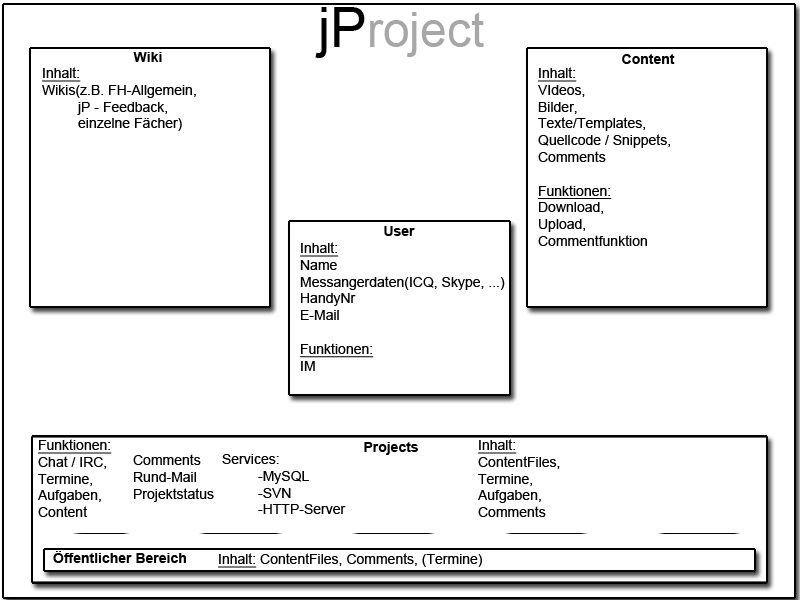
<style>
.page{position:relative;width:800px;height:600px;background:#ffffff}
.page>*{position:absolute;margin:0}
.t1{font:48px "ArialMT";color:#a7a7a7}
.t2{font:55px "ArialMT";color:#010101}
.t3{font:14px "Arial-BoldMT";color:#000000}
.t4{font:14px "ArialMT";color:#000000}
.t5{font:14px "ArialMT";color:#000000;text-decoration:underline}
</style>
<div class="page">
<p class="t1" style="left:315px;top:7px;width:169px;height:51px"><span class="t2">jP</span>roject</p>
<p class="t3" style="left:133px;top:52px;width:29px;height:10px">Wiki</p>
<p class="t3" style="left:622px;top:54px;width:53px;height:10px">Content</p>
<p class="t4" style="left:42px;top:67px;width:154px;height:64px"><span class="t5">Inhalt:<br></span>Wikis(z.B. FH-Allgemein, <br> jP - Feedback,<br> einzelne Fächer)</p>
<p class="t4" style="left:538px;top:67px;width:132px;height:179px"><span class="t5">Inhalt:<br></span>VIdeos,<br>Bilder,<br>Texte/Templates,<br>Quellcode / Snippets,<br>Comments<br><br><span class="t5">Funktionen:<br></span>Download,<br>Upload,<br>Commentfunktion</p>
<p class="t3" style="left:384px;top:226px;width:31px;height:10px">User</p>
<p class="t4" style="left:300px;top:242px;width:205px;height:129px"><span class="t5">Inhalt:<br></span>Name<br>Messangerdaten(ICQ, Skype, ...)<br>HandyNr<br>E-Mail<br><br><span class="t5">Funktionen:<br></span>IM</p>
<p class="t4" style="left:38px;top:439px;width:74px;height:78px"><span class="t5">Funktionen:<br></span>Chat / IRC,<br>Termine,<br>Aufgaben,<br>Content</p>
<p class="t3" style="left:364px;top:442px;width:54px;height:13px">Projects</p>
<p class="t4" style="left:478px;top:439px;width:82px;height:78px"><span class="t5">Inhalt:<br></span>ContentFiles,<br>Termine,<br>Aufgaben,<br>Comments</p>
<p class="t4" style="left:133px;top:454px;width:81px;height:48px">Comments<br>Rund-Mail<br>Projektstatus</p>
<p class="t4" style="left:222px;top:454px;width:124px;height:60px">Services:<br> -MySQL<br> -SVN<br> -HTTP-Server</p>
<p class="t3" style="left:53px;top:551px;width:133px;height:12px">Öffentlicher Bereich</p>
<p class="t4" style="left:218px;top:553px;width:264px;height:15px"><span class="t5">Inhalt:</span> ContentFiles, Comments, (Termine)</p>
</div>
